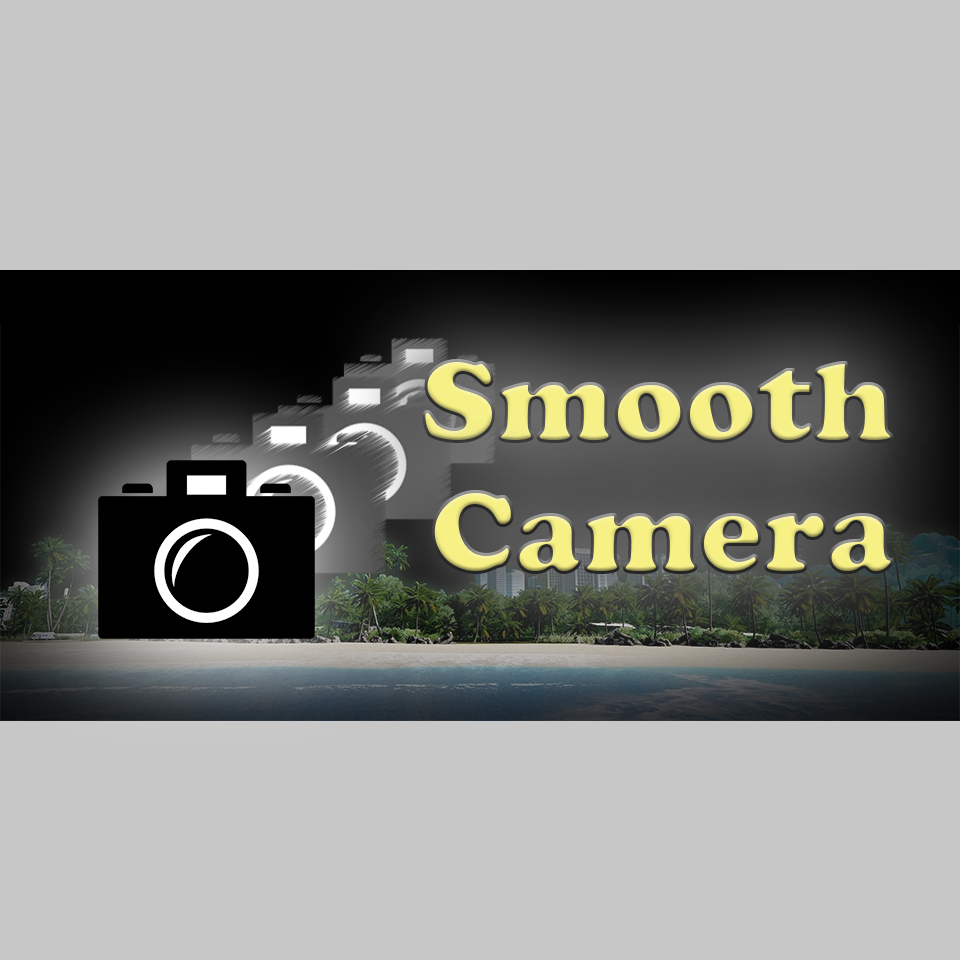
<style>
.page{position:relative;width:960px;height:960px;background:#c7c7c7}
.page>*{position:absolute;margin:0}
.t1{font:120px "CooperBlack"}
</style>
<div class="page">
<p class="t1" style="left:422px;top:359px;width:472px;height:85px">Smooth</p>
<p class="t1" style="left:431px;top:490px;width:463px;height:85px">Camera</p>
</div>
